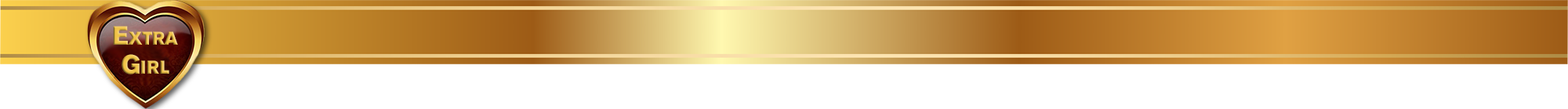
<style>
.page{position:relative;width:1568px;height:109px;background:#ffffff}
.page>*{position:absolute;margin:0}
.t1{font:26.2px/29.4px "AkzidenzGroteskPro-Super";font-variant:small-caps;scale:0.93 1}
</style>
<div class="page">
<p class="t1" style="left:113px;top:26px;width:65px;height:48px;text-align:center">Extra<br>Girl</p>
</div>
